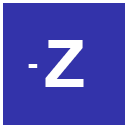
<style>
.page{position:relative;width:128px;height:128px;background:#3333aa}
.page>*{position:absolute;margin:0}
.t1{font:65px "Arial-BoldMT";letter-spacing:0.05em;color:#ffffff}
.t2{font:31px "Arial-BoldMT";letter-spacing:0.05em;color:#ffffff}
</style>
<div class="page">
<p class="t1" style="left:45px;top:40px;width:39px;height:47px">Z</p>
<p class="t2" style="left:28px;top:64px;width:10px;height:4px">-</p>
</div>
